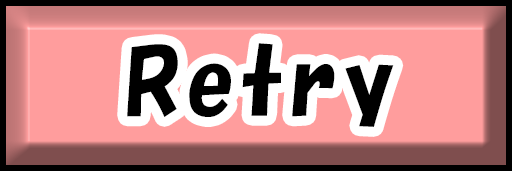
<style>
.page{position:relative;width:512px;height:171px;background:#ff9d9d}
.page>*{position:absolute;margin:0}
.t1{font:90px "HGPSoeiKakupoptai";letter-spacing:0.08em;color:#000000}
</style>
<div class="page">
<p class="t1" style="left:127px;top:43px;width:267px;height:84px">Retry</p>
</div>
